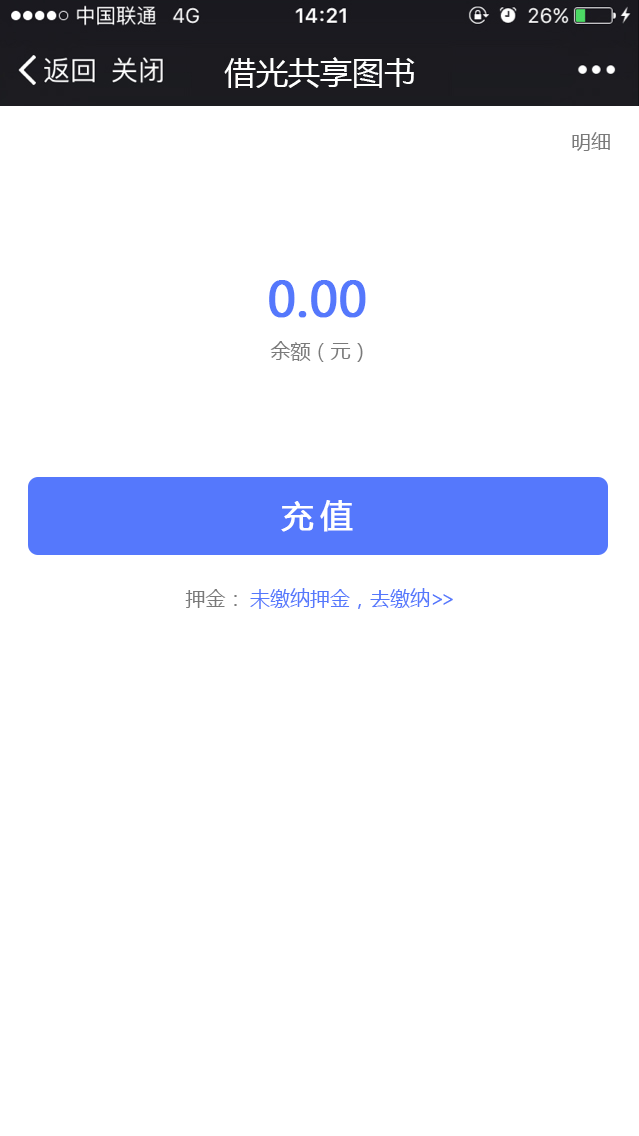
<style>
.page{position:relative;width:639px;height:1136px;background:#ffffff}
.page>*{position:absolute;margin:0}
.t1{font:20px "MicrosoftYaHei";color:#7a7a7a}
.t2{font:48px "MicrosoftYaHei";color:#5578fc;font-weight:bold}
.t3{font:32px "MicrosoftYaHei";letter-spacing:0.2em;color:#ffffff;font-weight:bold}
.t4{font:20px "MicrosoftYaHei";color:#5578fc}
.t5{font:20px "MicrosoftYaHei";letter-spacing:-0.2em;color:#5578fc}
</style>
<div class="page">
<p class="t1" style="left:572px;top:132px;width:38px;height:19px">明细</p>
<p class="t2" style="left:269px;top:280px;width:97px;height:38px">0.00</p>
<p class="t1" style="left:270px;top:341px;width:93px;height:21px">余额（元）</p>
<p class="t3" style="left:281px;top:500px;width:72px;height:32px">充值</p>
<p class="t1" style="left:185px;top:589px;width:52px;height:19px">押金：</p>
<p class="t4" style="left:250px;top:588px;width:203px;height:21px">未缴纳押金，去缴纳<span class="t5">&gt;&gt;</span></p>
</div>
